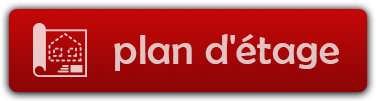
<style>
.page{position:relative;width:376px;height:101px}
.page>*{position:absolute;margin:0}
.t1{font:43.5px "BerlinSansFB-Reg";color:#e2c2c2}
</style>
<div class="page">
<p class="t1" style="left:114px;top:34px;width:225px;height:37px">plan d'étage</p>
</div>
